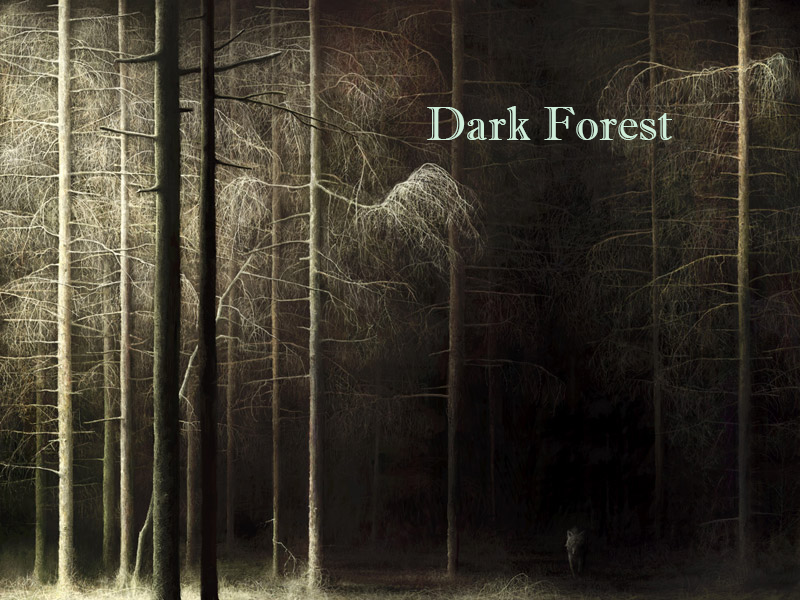
<style>
.page{position:relative;width:800px;height:600px}
.page>*{position:absolute;margin:0}
.t1{font:48px "ImprintMT-Shadow";color:#cfeeda}
</style>
<div class="page">
<p class="t1" style="left:427px;top:106px;width:245px;height:34px">Dark Forest</p>
</div>
